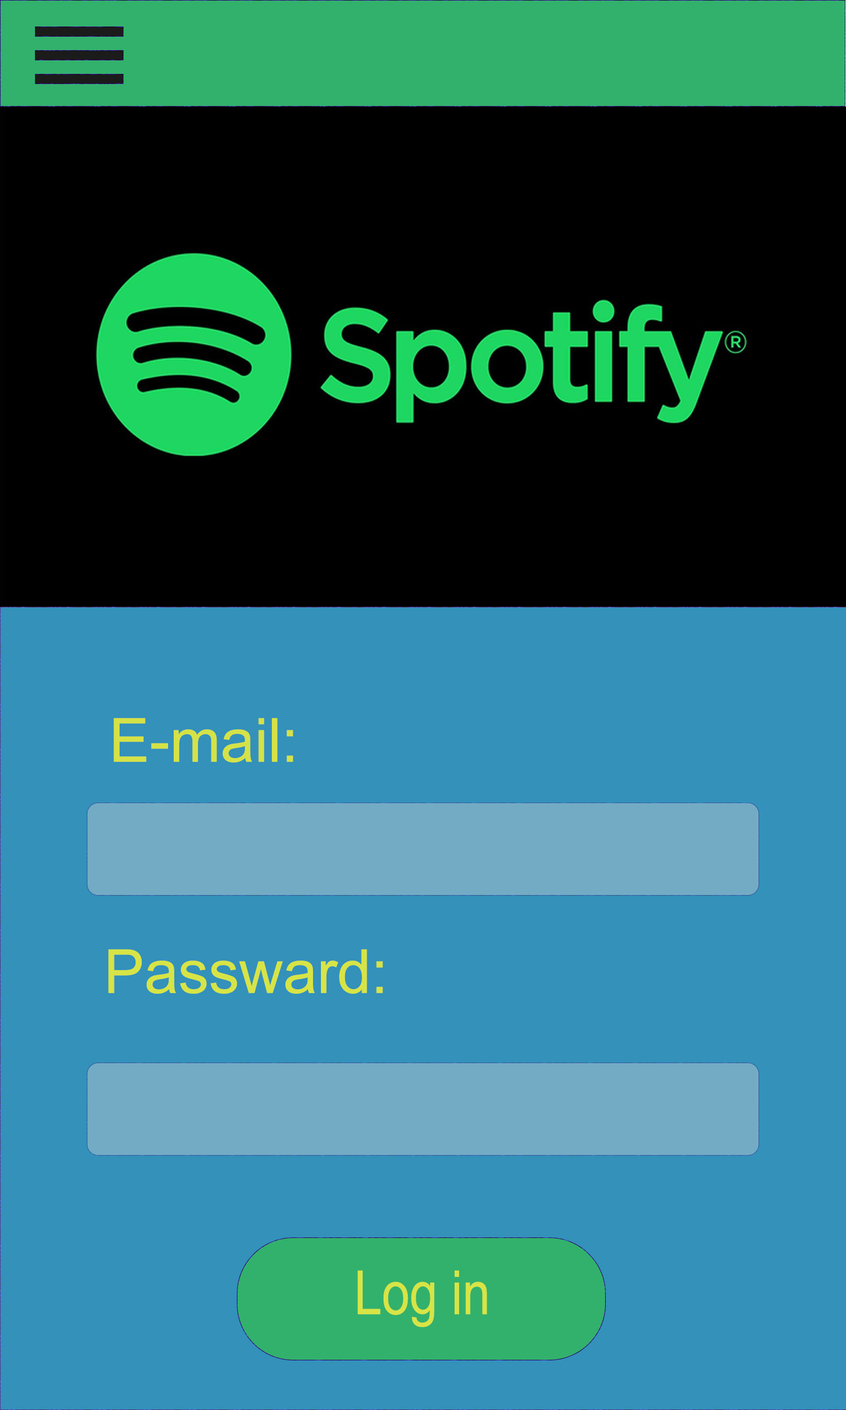
<style>
.page{position:relative;width:846px;height:1410px;background:#3391ba}
.page>*{position:absolute;margin:0}
.t1{font:60.9px "ArialMT";color:#d5e247}
.t2{font:60.9px "ArialMT";color:#d7e446}
.t3{font:60.9px "ArialNarrow";color:#d7e446}
</style>
<div class="page">
<p class="t1" style="left:113px;top:718px;width:180px;height:44px">E-mail:</p>
<p class="t2" style="left:108px;top:949px;width:275px;height:45px">Passward:</p>
<p class="t3" style="left:358px;top:1270px;width:129px;height:57px">Log in</p>
</div>
